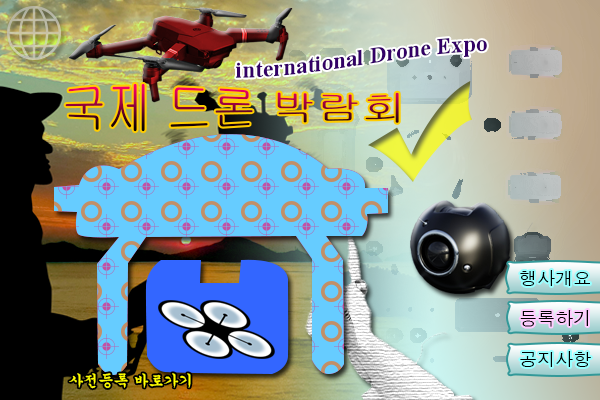
<style>
.page{position:relative;width:600px;height:400px}
.page>*{position:absolute;margin:0}
.t1{font:23px "TimesNewRomanPS-BoldMT";color:#330066}
.t2{font:45px "Gulim"}
.t3{font:18px "Dotum";color:#000000}
.t4{font:15px "Gungsuh";color:#ffff00}
</style>
<div class="page">
<p class="t1" style="left:236px;top:38px;width:251px;height:40px">international Drone Expo</p>
<p class="t2" style="left:65px;top:83px;width:334px;height:49px">국제 드론 박람회</p>
<p class="t3" style="left:520px;top:270px;width:70px;height:16px">행사개요</p>
<p class="t3" style="left:520px;top:310px;width:69px;height:17px">등록하기</p>
<p class="t3" style="left:520px;top:351px;width:71px;height:16px">공지사항</p>
<p class="t4" style="left:69px;top:373px;width:122px;height:16px">사전등록 바로가기</p>
</div>
